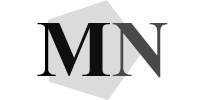
<style>
.page{position:relative;width:200px;height:100px;background:#ffffff}
.page>*{position:absolute;margin:0}
.t1{font:80px "TimesNewRomanPS-BoldMT";color:#000102}
.t2{font:80px "TimesNewRomanPS-BoldMT";color:#494949}
</style>
<div class="page">
<p class="t1" style="left:37px;top:23px;width:131px;height:55px">M<span class="t2">N</span></p>
</div>
